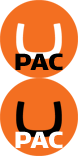
<style>
.page{position:relative;width:78px;height:156px;background:#f36f21}
.page>*{position:absolute;margin:0}
.t1{font:26.5px "SimianText-Chimpanzee";color:#000000}
.t2{font:26.5px "SimianText-Chimpanzee";color:#fffefe}
</style>
<div class="page">
<p class="t1" style="left:15px;top:53px;width:48px;height:18px">PAC</p>
<p class="t2" style="left:15px;top:131px;width:48px;height:18px">PAC</p>
</div>
